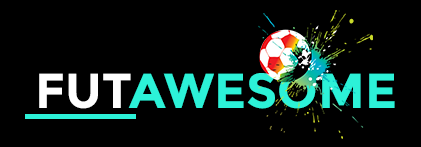
<style>
.page{position:relative;width:421px;height:147px;background:#000000}
.page>*{position:absolute;margin:0}
.t1{font:49.1px "Montserrat-Bold";color:#2cf2d8}
.t2{font:49.1px "Montserrat-Bold";color:#fefefe}
</style>
<div class="page">
<p class="t1" style="left:39px;top:73px;width:356px;height:36px"><span class="t2">FUT</span>AWESOME</p>
</div>
